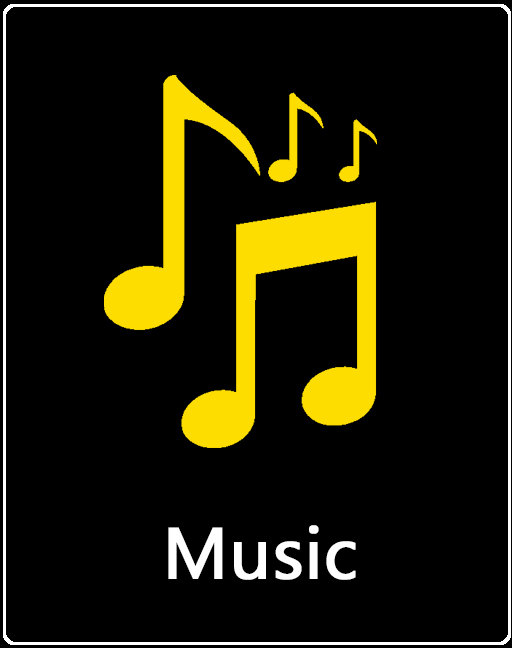
<style>
.page{position:relative;width:512px;height:648px;background:#000000}
.page>*{position:absolute;margin:0}
.t1{font:72px "Gadugi";color:#ffffff;font-weight:bold}
</style>
<div class="page">
<p class="t1" style="left:168px;top:525px;width:188px;height:55px">Music</p>
</div>
